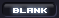
<style>
.page{position:relative;width:59px;height:18px;background:#1e1e2a}
.page>*{position:absolute;margin:0}
.t1{font:8px "04b09";color:#ffffff}
</style>
<div class="page">
<p class="t1" style="left:13px;top:8px;width:34px;height:5px">BLANK</p>
</div>
